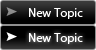
<style>
.page{position:relative;width:96px;height:50px}
.page>*{position:absolute;margin:0}
.t1{font:12px "MyriadPro-Regular";color:#ffffff}
</style>
<div class="page">
<p class="t1" style="left:29px;top:8px;width:54px;height:11px">New Topic</p>
<p class="t1" style="left:29px;top:33px;width:54px;height:11px">New Topic</p>
</div>
